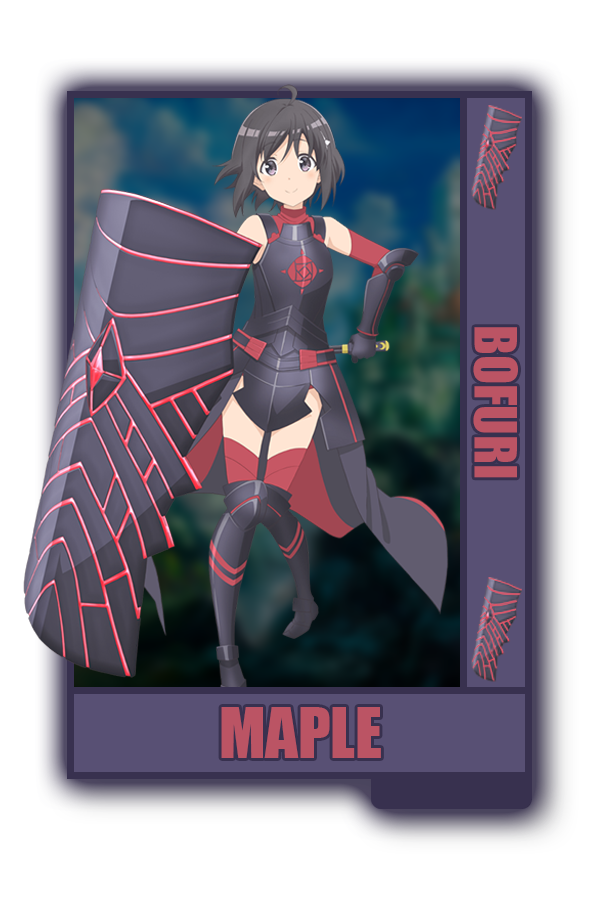
<style>
.page{position:relative;width:600px;height:900px;background:#ffffff}
.page>*{position:absolute;margin:0}
.t1{font:53.6px "Impact";color:#bb5464}
.t2{font:64.6px "Impact";color:#bb5464}
</style>
<div class="page">
<p class="t1" style="left:473px;top:327px;width:45px;height:151px;rotate:90deg">BOFURI</p>
<p class="t2" style="left:221px;top:707px;width:160px;height:51px">MAPLE</p>
</div>
